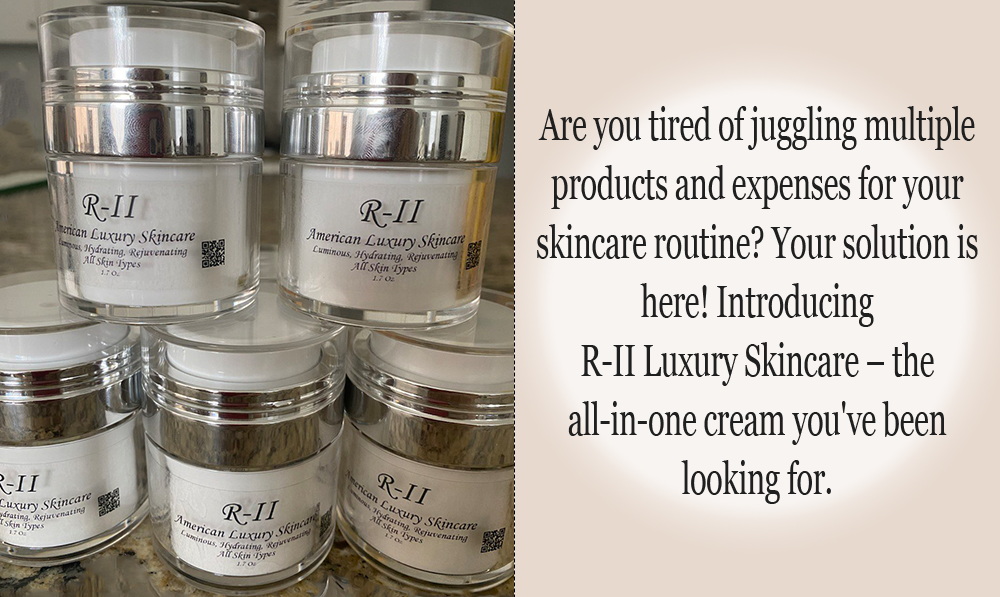
<style>
.page{position:relative;width:1000px;height:597px}
.page>*{position:absolute;margin:0}
.t1{font:45.3px/59px "Georgia";letter-spacing:-0.02em;color:#201f1f;scale:0.69 1}
</style>
<div class="page">
<p class="t1" style="left:537px;top:106px;width:441px;height:398px;text-align:center">Are you tired of juggling multiple products and expenses for your skincare routine? Your solution is here! Introducing <br>R-II Luxury Skincare – the all-in-one cream you've been looking for.</p>
</div>
